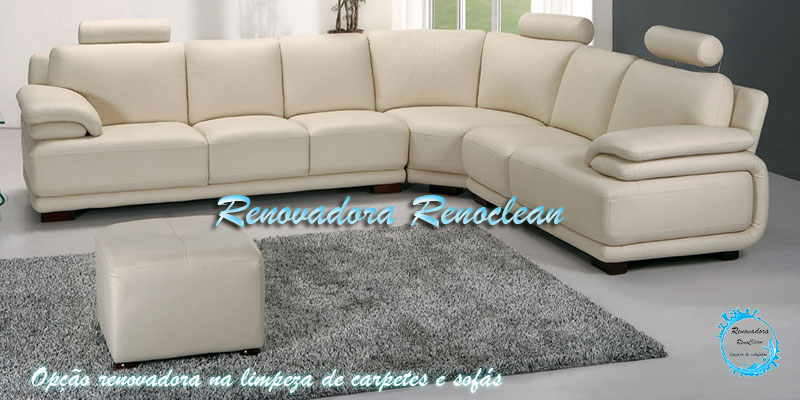
<style>
.page{position:relative;width:800px;height:400px}
.page>*{position:absolute;margin:0}
.t1{font:48px "BrushScriptMT"}
.t2{font:30px "BrushScriptMT";color:#fefbfb}
</style>
<div class="page">
<p class="t1" style="left:215px;top:195px;width:349px;height:32px">Renovadora Renoclean</p>
<p class="t2" style="left:31px;top:367px;width:472px;height:26px">Opção renovadora na limpeza de carpetes e sofás</p>
</div>
